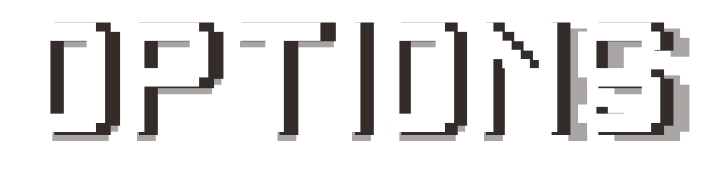
<style>
.page{position:relative;width:717px;height:172px;background:#ffffff}
.page>*{position:absolute;margin:0}
.t1{font:145.8px "PixelGameFont";letter-spacing:0.02em;color:#ffffff;text-transform:uppercase}
.t2{font:150px "PixelGameFont";text-transform:uppercase}
</style>
<div class="page">
<p class="t1" style="left:32px;top:22px;width:629px;height:110px">options</p>
<p class="t2" style="left:43px;top:28px;width:647px;height:113px">optioms</p>
<p class="t2" style="left:45px;top:22px;width:629px;height:113px">options</p>
</div>
